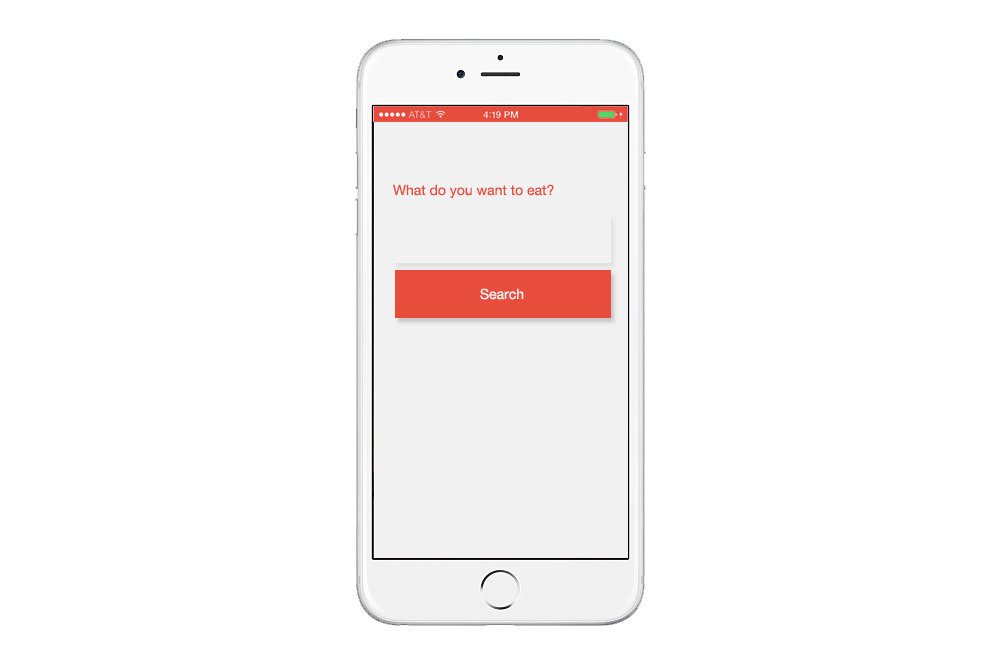
<style>
.page{position:relative;width:1000px;height:666px;background:#ffffff}
.page>*{position:absolute;margin:0}
.t1{font:14px "HelveticaNeueLTPro-Roman";color:#e84c3d}
.t2{font:14px "HelveticaNeueLTPro-Roman";color:#f1f1f1}
</style>
<div class="page">
<p class="t1" style="left:393px;top:184px;width:161px;height:14px">What do you want to eat?</p>
<p class="t2" style="left:480px;top:288px;width:44px;height:12px">Search</p>
</div>
